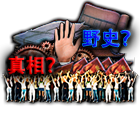
<style>
.page{position:relative;width:140px;height:140px;background:#ffffff}
.page>*{position:absolute;margin:0}
.t1{font:18.9px "AdobeHeitiStd-Regular";font-weight:bold}
</style>
<div class="page">
<p class="t1" style="left:82px;top:29px;width:49px;height:19px">野史？</p>
<p class="t1" style="left:7px;top:56px;width:49px;height:19px">真相？</p>
</div>
